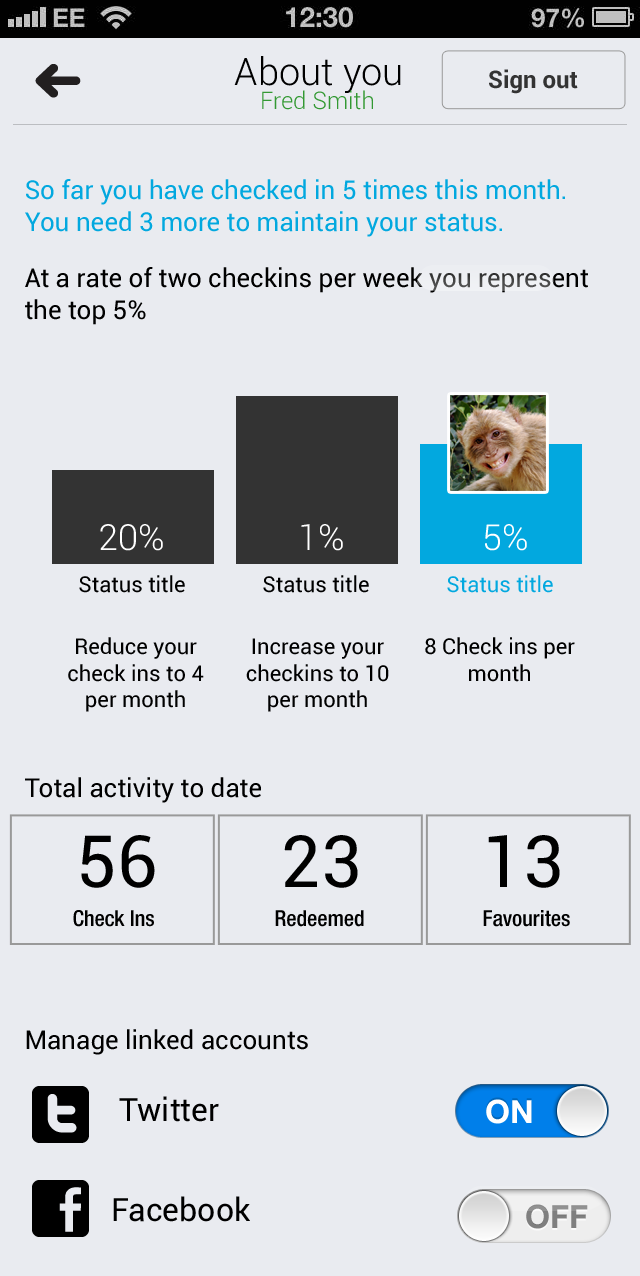
<style>
.page{position:relative;width:640px;height:1276px;background:#e9ebf0}
.page>*{position:absolute;margin:0}
.t1{font:38px "Roboto-Light";color:#000000}
.t2{font:24px "Roboto-Bold";color:#333333}
.t3{font:24px "Roboto-Light";color:#339933}
.t4{font:26px "Roboto-Regular";color:#02a8df}
.t5{font:26px "Roboto-Regular";color:#000000}
.t6{font:36px "Roboto-Light";color:#ffffff}
.t7{font:22px "Roboto-Regular";color:#000000}
.t8{font:22px "Roboto-Regular";color:#02a8df}
.t9{font:72px "Roboto-Regular";color:#000000}
.t10{font:22px "HelveticaNeueLTPro-MdCn";color:#000000}
.t11{font:32px "Roboto-Regular";color:#000000}
.t12{font:32px "HelveticaNeue-Bold";color:#ffffff}
.t13{font:32px "HelveticaNeue-Bold";color:#7f7f7f}
</style>
<div class="page">
<p class="t1" style="left:234px;top:56px;width:167px;height:37px">About you</p>
<p class="t2" style="left:489px;top:69px;width:89px;height:25px">Sign out</p>
<p class="t3" style="left:262px;top:90px;width:111px;height:20px">Fred Smith</p>
<p class="t4" style="left:25px;top:179px;width:540px;height:58px">So far you have checked in 5 times this month. You need 3 more to maintain your status.</p>
<p class="t5" style="left:25px;top:267px;width:563px;height:58px">At a rate of two checkins per week you represent the top 5%</p>
<p class="t6" style="left:100px;top:524px;width:63px;height:27px">20%</p>
<p class="t6" style="left:301px;top:524px;width:42px;height:27px">1%</p>
<p class="t6" style="left:485px;top:524px;width:42px;height:27px">5%</p>
<p class="t7" style="left:79px;top:575px;width:106px;height:18px">Status title</p>
<p class="t7" style="left:263px;top:575px;width:106px;height:18px">Status title</p>
<p class="t8" style="left:447px;top:575px;width:106px;height:18px">Status title</p>
<p class="t7" style="left:68px;top:637px;width:136px;height:75px;text-align:center">Reduce your check ins to 4 per month</p>
<p class="t7" style="left:246px;top:638px;width:143px;height:74px;text-align:center">Increase your checkins to 10 per month</p>
<p class="t7" style="left:425px;top:637px;width:150px;height:45px;text-align:center">8 Check ins per month</p>
<p class="t5" style="left:25px;top:777px;width:236px;height:26px">Total activity to date</p>
<p class="t9" style="left:81px;top:835px;width:74px;height:53px">56</p>
<p class="t9" style="left:284px;top:835px;width:74px;height:53px">23</p>
<p class="t9" style="left:488px;top:835px;width:72px;height:53px">13</p>
<p class="t10" style="left:73px;top:910px;width:81px;height:17px">Check Ins</p>
<p class="t10" style="left:275px;top:910px;width:89px;height:17px">Redeemed</p>
<p class="t10" style="left:483px;top:910px;width:87px;height:17px">Favourites</p>
<p class="t5" style="left:26px;top:1029px;width:282px;height:26px">Manage linked accounts</p>
<p class="t11" style="left:119px;top:1096px;width:100px;height:26px">Twitter</p>
<p class="t12" style="left:486px;top:1099px;width:46px;height:25px">ON</p>
<p class="t11" style="left:113px;top:1196px;width:137px;height:26px">Facebook</p>
<p class="t13" style="left:526px;top:1204px;width:62px;height:25px">OFF</p>
</div>
